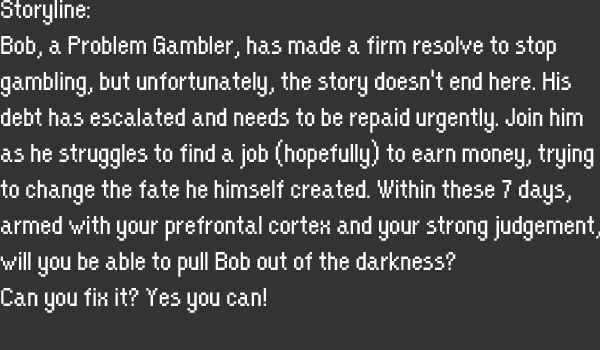
<style>
.page{position:relative;width:600px;height:350px;background:#333333}
.page>*{position:absolute;margin:0}
.t1{font:30px "OrangeKid-Regular";color:#ffffff}
</style>
<div class="page">
<p class="t1" style="left:0px;top:0px;width:601px;height:313px">Storyline: <br>Bob, a Problem Gambler, has made a firm resolve to stop <br>gambling, but unfortunately, the story doesn't end here. His <br>debt has escalated and needs to be repaid urgently. Join him <br>as he struggles to find a job (hopefully) to earn money, trying <br>to change the fate he himself created. Within these 7 days, <br>armed with your prefrontal cortex and your strong judgement, <br>will you be able to pull Bob out of the darkness?<br>Can you fix it? Yes you can!</p>
</div>
